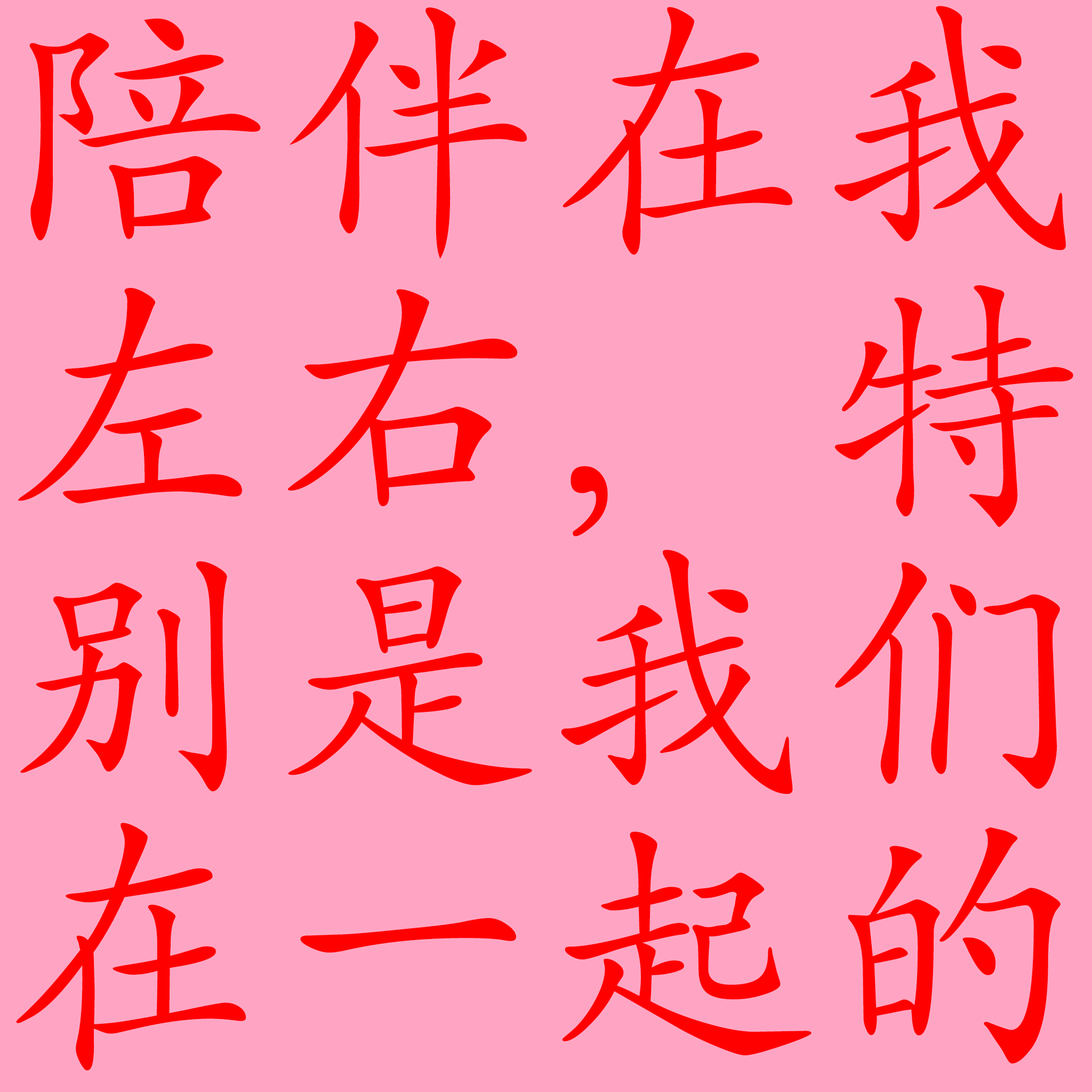
<style>
.page{position:relative;width:1092px;height:1092px;background:#ffa5c3}
.page>*{position:absolute;margin:0}
.t1{font:266.6px/271.9px "SIL-Kai-Reg-Jian";letter-spacing:0.025em;color:#ff0000}
</style>
<div class="page">
<p class="t1" style="left:16px;top:6px;width:1057px;height:1065px">陪伴在我<br>左右，特<br>别是我们<br>在一起的</p>
</div>
